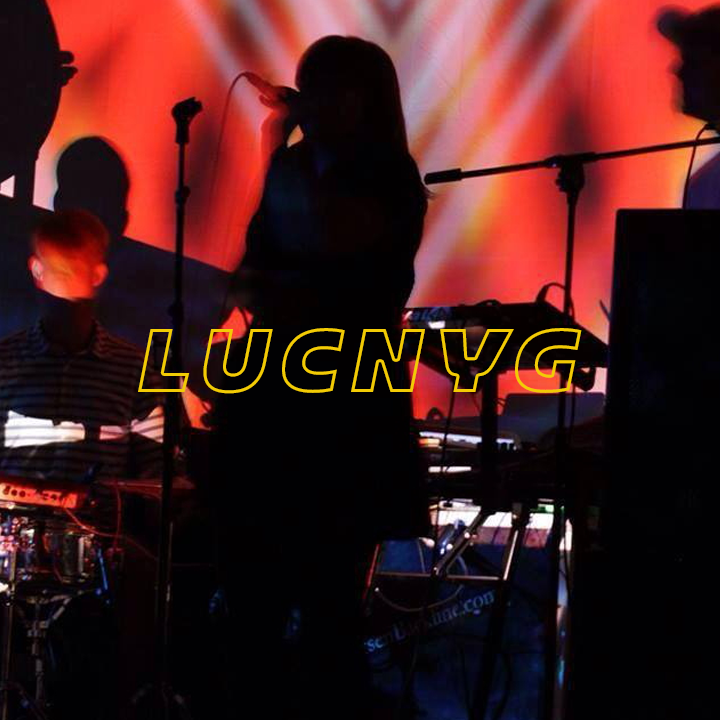
<style>
.page{position:relative;width:720px;height:720px}
.page>*{position:absolute;margin:0}
.t1{font:90px "Majoris-Italic";letter-spacing:0.1em;text-transform:uppercase}
</style>
<div class="page">
<p class="t1" style="left:138px;top:328px;width:444px;height:66px">lucnyg</p>
</div>
